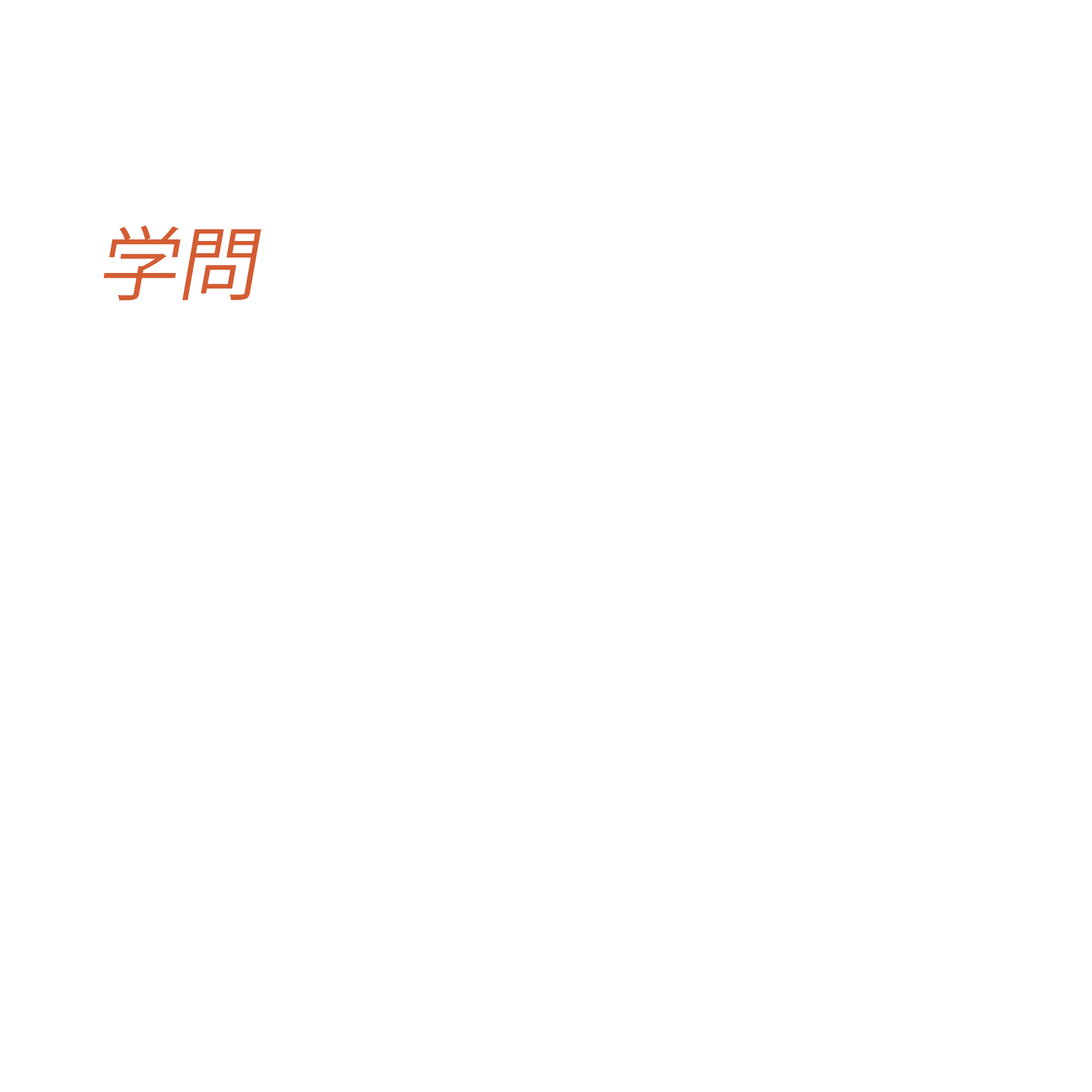
<style>
.page{position:relative;width:1092px;height:1092px;background:#ffffff}
.page>*{position:absolute;margin:0}
.t1{font:80px "KozGoPr6N-Regular";color:#d45c32;text-transform:uppercase;font-style:italic}
</style>
<div class="page">
<p class="t1" style="left:103px;top:225px;width:158px;height:76px">学問</p>
</div>
